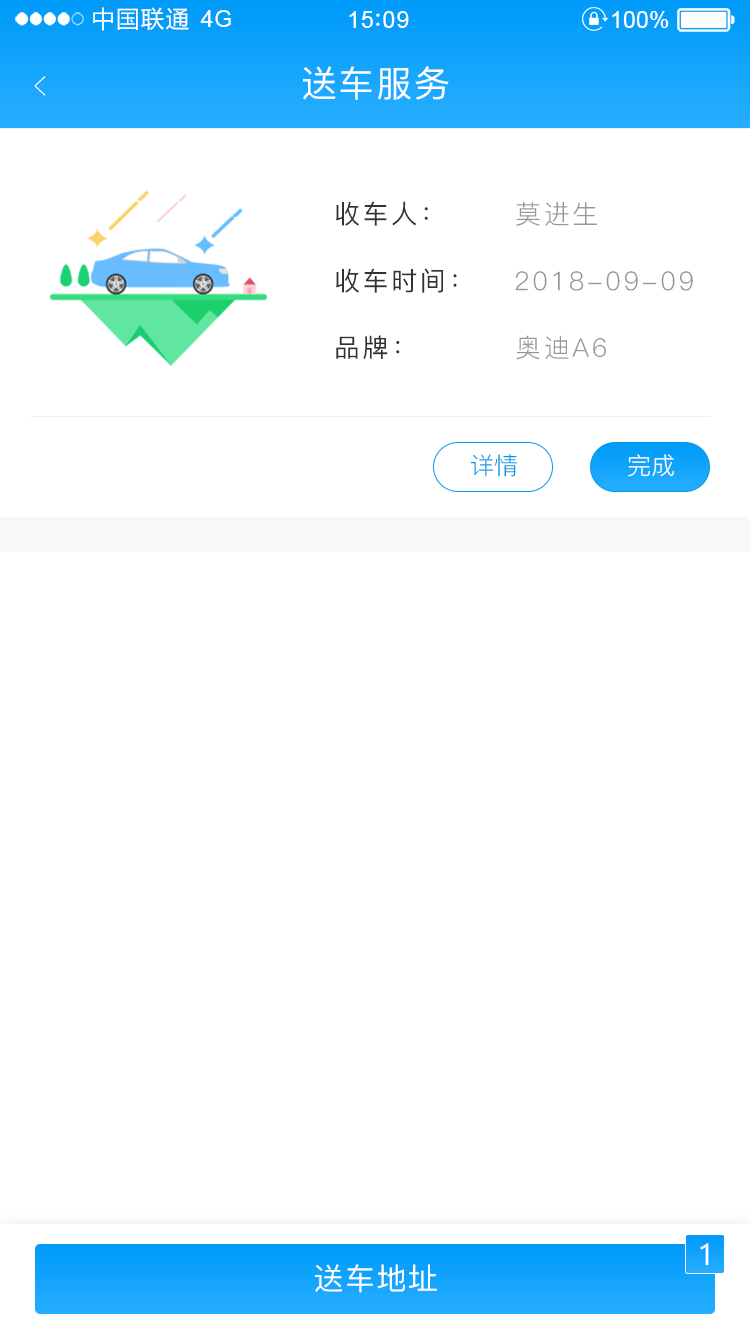
<style>
.page{position:relative;width:750px;height:1334px;background:#ffffff}
.page>*{position:absolute;margin:0}
.t1{font:23.4px "MicrosoftYaHei";letter-spacing:0.06em;color:#ffffff}
.t2{font:23.4px "ArialMT";letter-spacing:0.02em;color:#ffffff}
.t3{font:23.4px "ArialMT";letter-spacing:0.04em;color:#ffffff}
.t4{font:23.4px "ArialMT";color:#ffffff}
.t5{font:39px "PingFang-SC-ExtraLight";letter-spacing:0.1em;color:#ffffff;scale:0.51 1}
.t6{font:36px "PingFang-SC-Medium";letter-spacing:0.05em;color:#ffffff}
.t7{font:26px "PingFang-SC-Medium";letter-spacing:0.1em;color:#333333}
.t8{font:26.1px "PingFang-SC-Regular";letter-spacing:0.1em;color:#979797}
.t9{font:26px "PingFang-SC-Medium";letter-spacing:0.1em;color:#323232}
.t10{font:25.6px "PingFang-SC-Medium";letter-spacing:0.1em;color:#323232}
.t11{font:25.7px "PingFang-SC-Regular";letter-spacing:0.1em;color:#979797}
.t12{font:24px "PingFang-SC-Regular";color:#029be2}
.t13{font:24px "PingFang-SC-Regular";color:#ffffff}
.t14{font:30px "PingFang-SC-Medium";letter-spacing:0.05em;color:#ffffff}
</style>
<div class="page">
<p class="t1" style="left:93px;top:7px;width:96px;height:24px">中国联通</p>
<p class="t2" style="left:200px;top:10px;width:31px;height:17px">4G</p>
<p class="t3" style="left:349px;top:11px;width:60px;height:17px">15 09</p>
<p class="t4" style="left:612px;top:11px;width:57px;height:17px">100%</p>
<p class="t5" style="left:34px;top:76px;width:12px;height:20px;rotate:180deg">&gt;</p>
<p class="t6" style="left:303px;top:66px;width:146px;height:34px">送车服务</p>
<p class="t7" style="left:336px;top:201px;width:92px;height:25px">收车人：</p>
<p class="t8" style="left:516px;top:202px;width:81px;height:24px">莫进生</p>
<p class="t9" style="left:336px;top:268px;width:121px;height:25px">收车时间：</p>
<p class="t8" style="left:515px;top:271px;width:178px;height:20px">2018-09-09</p>
<p class="t10" style="left:336px;top:335px;width:64px;height:25px">品牌：</p>
<p class="t11" style="left:516px;top:335px;width:90px;height:25px">奥迪A6</p>
<p class="t12" style="left:470px;top:454px;width:47px;height:23px">详情</p>
<p class="t13" style="left:628px;top:454px;width:46px;height:23px">完成</p>
<p class="t14" style="left:700px;top:1243px;width:9px;height:22px">1</p>
<p class="t14" style="left:315px;top:1264px;width:122px;height:29px">送车地址</p>
</div>
